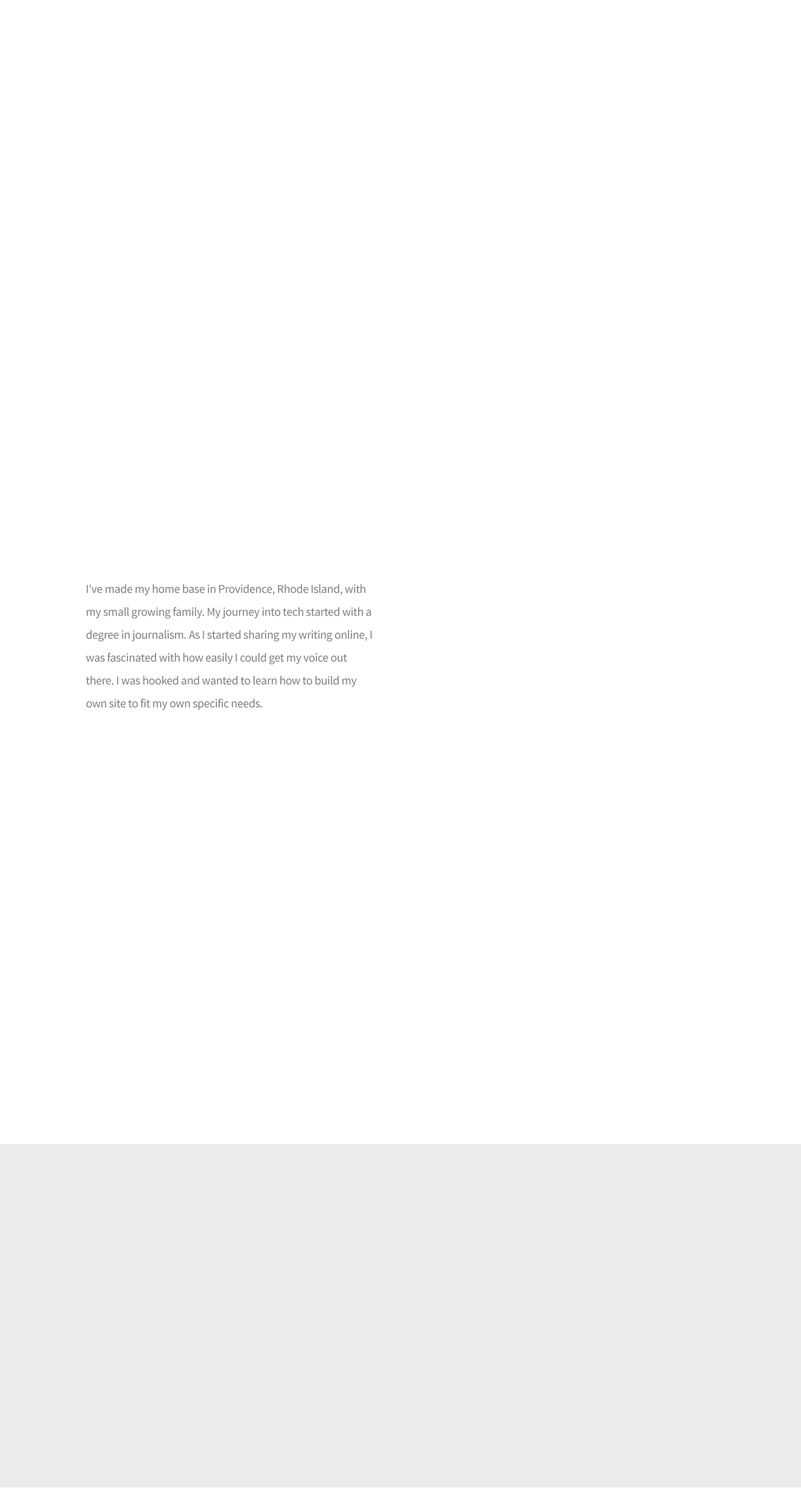
<style>
.page{position:relative;width:801px;height:1488px;background:#ffffff}
.page>*{position:absolute;margin:0}
.t1{font:12px/22.9px "SourceSansPro-Regular";letter-spacing:-0.02em;color:#7f7f7f}
</style>
<div class="page">
<p class="t1" style="left:86px;top:584px;width:286px;height:126px">I've made my home base in Providence, Rhode Island, with my small growing family. My journey into tech started with a degree in journalism. As I started sharing my writing online, I was fascinated with how easily I could get my voice out there. I was hooked and wanted to learn how to build my own site to fit my own specific needs.</p>
</div>
